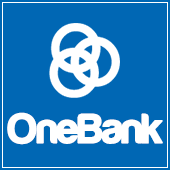
<style>
.page{position:relative;width:170px;height:170px;background:#0067b4}
.page>*{position:absolute;margin:0}
.t1{font:42.5px "Harabara";letter-spacing:-0.025em;color:#ffffff;font-weight:bold}
</style>
<div class="page">
<p class="t1" style="left:7px;top:112px;width:156px;height:33px">OneBank</p>
</div>
